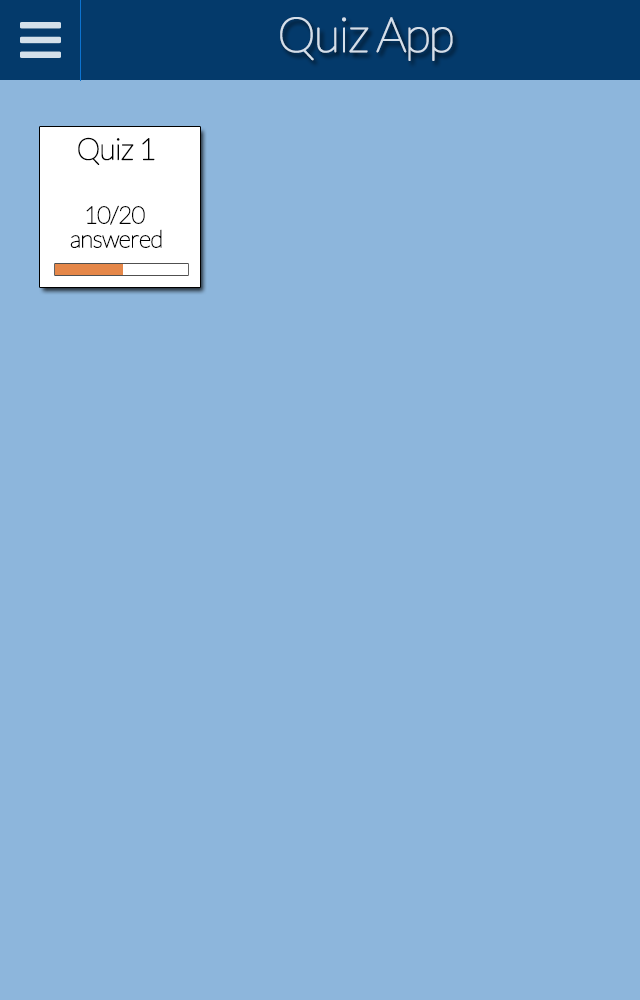
<style>
.page{position:relative;width:640px;height:1000px;background:#8db6dc}
.page>*{position:absolute;margin:0}
.t1{font:48px "Lato-Hairline";letter-spacing:-0.05em;color:#d4dfea;font-weight:bold}
.t2{font:30px "Lato-Hairline";letter-spacing:-0.05em;color:#000000;font-weight:bold}
.t3{font:24px/24px "Lato-Hairline";letter-spacing:-0.05em;color:#000000;font-weight:bold}
</style>
<div class="page">
<p class="t1" style="left:280px;top:17px;width:173px;height:44px">Quiz App</p>
<p class="t2" style="left:78px;top:137px;width:77px;height:28px">Quiz 1</p>
<p class="t3" style="left:70px;top:205px;width:92px;height:43px;text-align:center">10/20 <br>answered</p>
</div>
